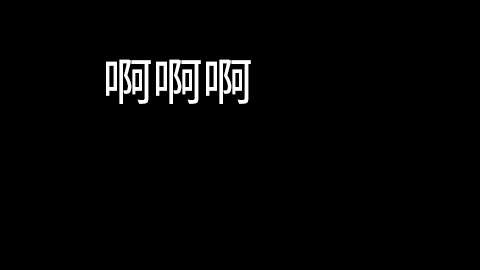
<style>
.page{position:relative;width:480px;height:270px;background:#000000}
.page>*{position:absolute;margin:0}
.t1{font:50px "SourceHanSansCN-Regular";color:#ffffff}
</style>
<div class="page">
<p class="t1" style="left:106px;top:59px;width:145px;height:45px">啊啊啊</p>
</div>
